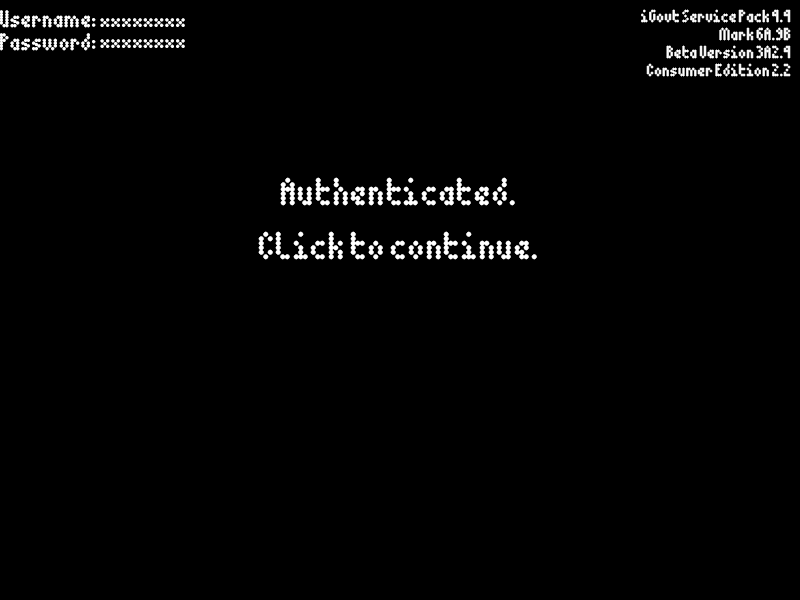
<style>
.page{position:relative;width:800px;height:600px;background:#000000}
.page>*{position:absolute;margin:0}
.t1{font:22px "5Dotmatrix-1979";letter-spacing:-0.01em;color:#ffffff}
.t2{font:16px/18px "5Dotmatrix-1979";letter-spacing:-0.01em;color:#ffffff}
.t3{font:36px/18px "5Dotmatrix-1979";letter-spacing:-0.01em;color:#ffffff}
</style>
<div class="page">
<p class="t1" style="left:0px;top:10px;width:185px;height:18px">Username: ********</p>
<p class="t2" style="left:641px;top:9px;width:150px;height:68px;text-align:right">iGovt Service Pack 4.4<br>Mark 6A.9B<br> Beta Version 3A2.4<br>Consumer Edition 2.2</p>
<p class="t1" style="left:0px;top:33px;width:185px;height:18px">Password: ********</p>
<p class="t3" style="left:258px;top:177px;width:279px;height:83px;text-align:center">Authenticated.<br><br><br>Click to continue.</p>
</div>
